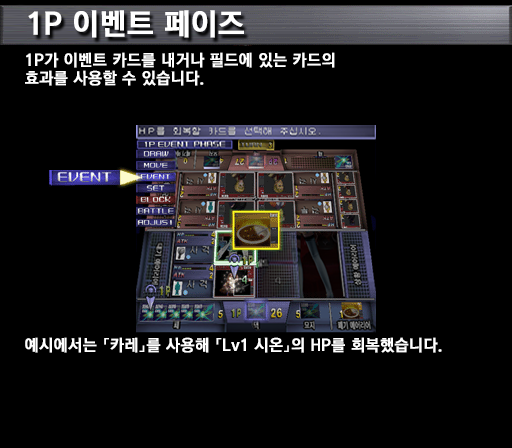
<style>
.page{position:relative;width:512px;height:448px;background:#000000}
.page>*{position:absolute;margin:0}
.t1{font:30px "KoreanGD15-R";color:#ffffff;font-weight:bold}
.t2{font:16px/18px "KoreanGD15-R";color:#ffffff;font-weight:bold}
.t3{font:16px "KoreanGD15-R";color:#ffffff;font-weight:bold}
</style>
<div class="page">
<p class="t1" style="left:28px;top:10px;width:216px;height:28px">1P 이벤트 페이즈</p>
<p class="t2" style="left:25px;top:52px;width:310px;height:34px">1P가 이벤트 카드를 내거나 필드에 있는 카드의<br>효과를 사용할 수 있습니다.</p>
<p class="t3" style="left:25px;top:337px;width:417px;height:16px">예시에서는 「카레」를 사용해 「Lv1 시온」의 HP를 회복했습니다.</p>
</div>
